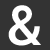
<style>
.page{position:relative;width:50px;height:50px;background:#333333}
.page>*{position:absolute;margin:0}
.t1{font:55px "Roboto-Medium";letter-spacing:0.05em;color:#ffffff}
</style>
<div class="page">
<p class="t1" style="left:8px;top:5px;width:33px;height:41px">&amp;</p>
</div>
